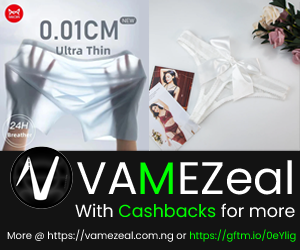
<style>
.page{position:relative;width:300px;height:250px;background:#131313}
.page>*{position:absolute;margin:0}
.t1{font:45.7px "Poppins-Regular";color:#ffffff}
.t2{font:45.7px "Poppins-Regular";color:#00ff00}
.t3{font:17.4px "Poppins-Regular";color:#00ff00}
.t4{font:17.4px "Poppins-Regular";color:#ffffff}
.t5{font:10px "Poppins-Regular";color:#ffffff}
.t6{font:10px "Poppins-Regular";color:#00ff00}
</style>
<div class="page">
<p class="t1" style="left:77px;top:160px;width:215px;height:35px">VA<span class="t2">M</span>EZeal</p>
<p class="t3" style="left:75px;top:203px;width:220px;height:15px"><span class="t4">With </span>Cashbacks<span class="t4"> for more</span></p>
<p class="t5" style="left:7px;top:229px;width:289px;height:13px">More @ https://vamezeal.com.ng or <span class="t6">https://gftm.io/0eYlig</span></p>
</div>
